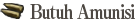
<style>
.page{position:relative;width:136px;height:22px;background:#ffffff}
.page>*{position:absolute;margin:0}
.t1{font:20px "RyuminPro-ExBold";letter-spacing:-0.08em;color:#4d4843;scale:0.85 1}
</style>
<div class="page">
<p class="t1" style="left:30px;top:4px;width:105px;height:16px">Butuh Amunisi</p>
</div>
